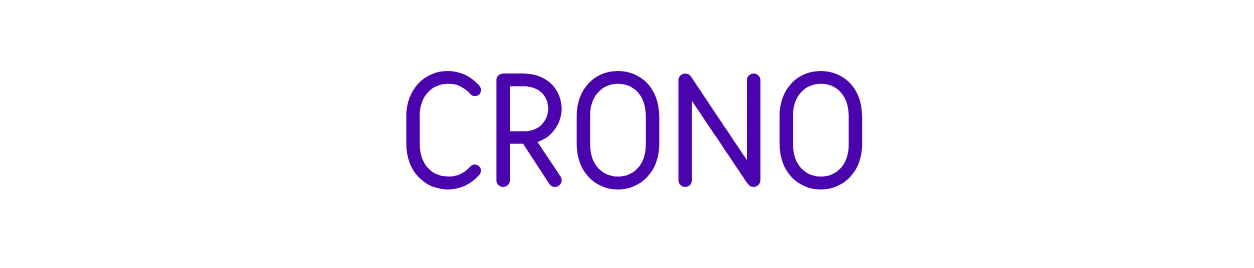
<style>
.page{position:relative;width:1254px;height:268px;background:#ffffff}
.page>*{position:absolute;margin:0}
.t1{font:160px "SarySoft-Regular";color:#4b03ad}
</style>
<div class="page">
<p class="t1" style="left:406px;top:71px;width:457px;height:119px">CRONO</p>
</div>
